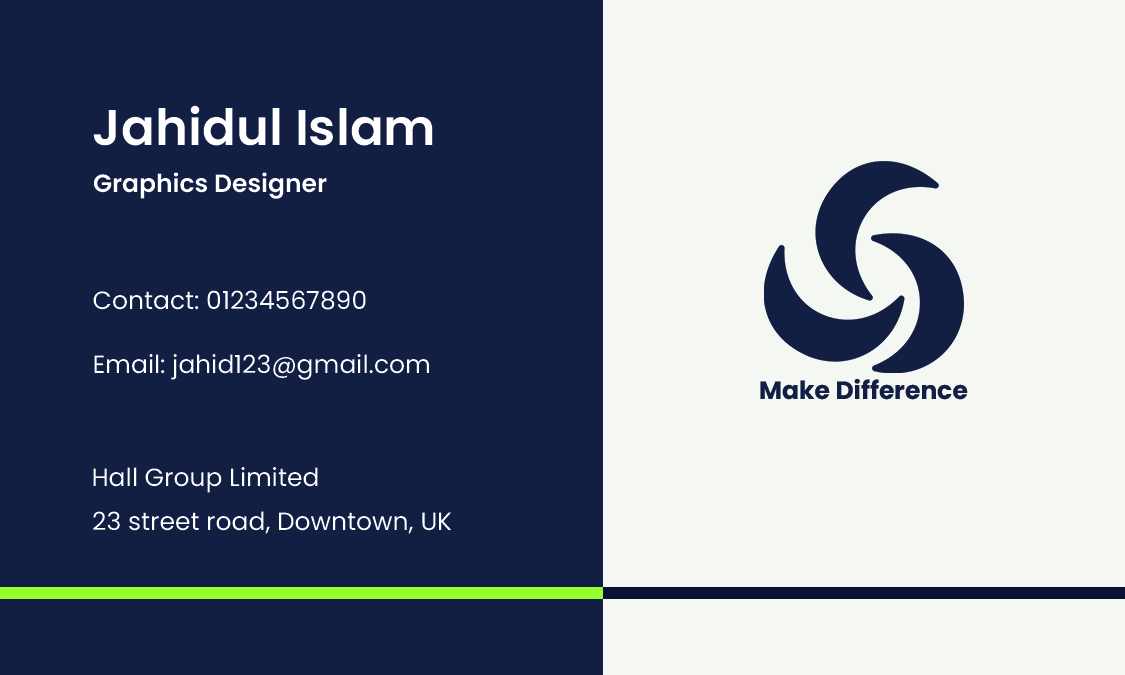
<style>
.page{position:relative;width:1125px;height:675px;background:#121f43}
.page>*{position:absolute;margin:0}
.t1{font:50px "Poppins-SemiBold";color:#ffffff}
.t2{font:25px "Poppins-SemiBold";color:#ffffff}
.t3{font:25px "Poppins-Regular";color:#ffffff}
.t4{font:25px "Poppins-Bold";color:#121f43}
</style>
<div class="page">
<p class="t1" style="left:93px;top:105px;width:340px;height:41px">Jahidul Islam</p>
<p class="t2" style="left:94px;top:172px;width:233px;height:27px">Graphics Designer</p>
<p class="t3" style="left:93px;top:290px;width:273px;height:20px">Contact: 01234567890</p>
<p class="t3" style="left:94px;top:354px;width:335px;height:26px">Email: jahid123@gmail.com</p>
<p class="t4" style="left:760px;top:379px;width:208px;height:21px">Make Difference</p>
<p class="t3" style="left:93px;top:467px;width:225px;height:26px">Hall Group Limited</p>
<p class="t3" style="left:93px;top:511px;width:359px;height:23px">23 street road, Downtown, UK</p>
</div>
